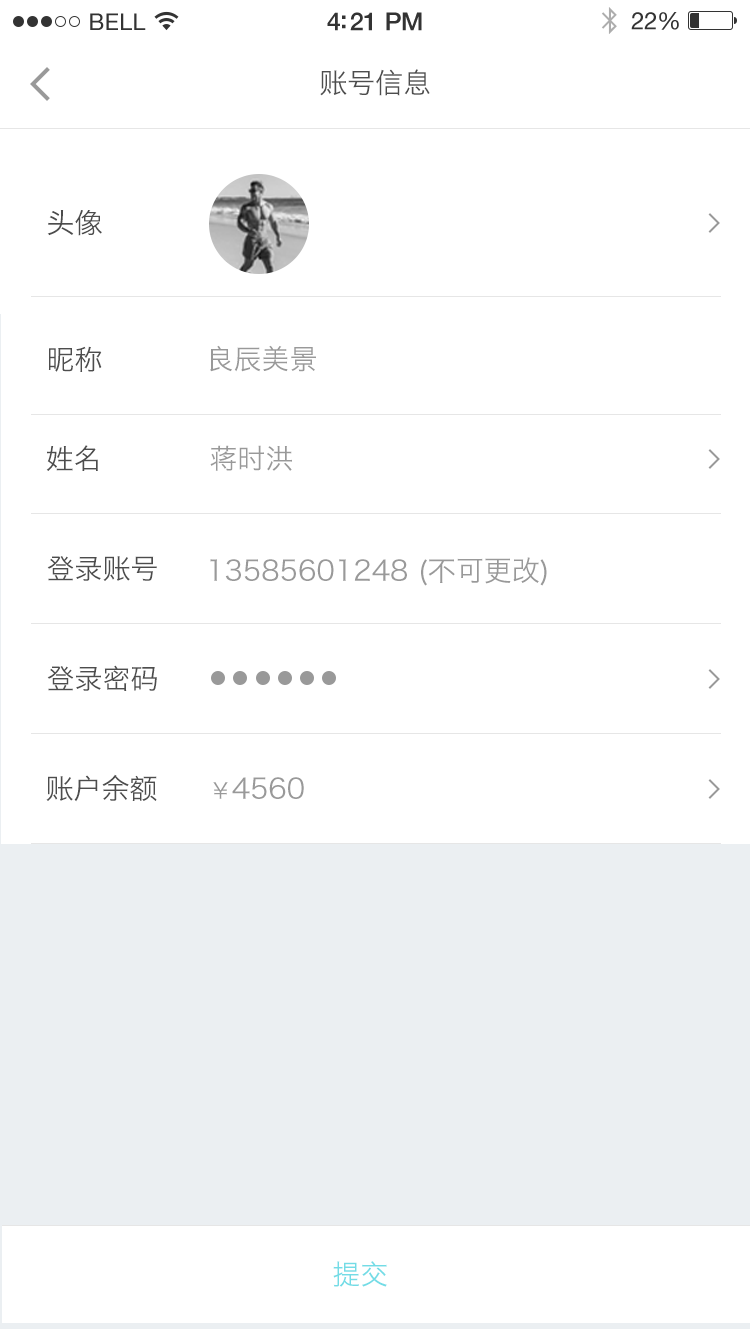
<style>
.page{position:relative;width:750px;height:1329px;background:#ffffff}
.page>*{position:absolute;margin:0}
.t1{font:28px "HiraginoSansGB-W3";color:#4d4d4d}
.t2{font:28px "HiraginoSansGB-W3";color:#4c4c4c}
.t3{font:28px "HiraginoSansGB-W3";color:#999999}
.t4{font:22px "HiraginoSansGB-W3";color:#999999}
.t5{font:28px "HiraginoSansGB-W3";color:#73dce6}
</style>
<div class="page">
<p class="t1" style="left:320px;top:69px;width:110px;height:27px">账号信息</p>
<p class="t2" style="left:47px;top:210px;width:55px;height:26px">头像</p>
<p class="t1" style="left:48px;top:346px;width:54px;height:26px">昵称</p>
<p class="t3" style="left:210px;top:345px;width:106px;height:27px">良辰美景</p>
<p class="t1" style="left:46px;top:445px;width:52px;height:26px">姓名</p>
<p class="t3" style="left:210px;top:445px;width:82px;height:26px">蒋时洪</p>
<p class="t2" style="left:47px;top:556px;width:110px;height:25px">登录账号</p>
<p class="t3" style="left:210px;top:557px;width:337px;height:29px">13585601248 (不可更改)</p>
<p class="t1" style="left:47px;top:665px;width:110px;height:26px">登录密码</p>
<p class="t1" style="left:46px;top:774px;width:111px;height:28px">账户余额</p>
<p class="t3" style="left:213px;top:777px;width:91px;height:22px"><span class="t4">￥</span>4560</p>
<p class="t5" style="left:333px;top:1261px;width:54px;height:26px">提交</p>
</div>
